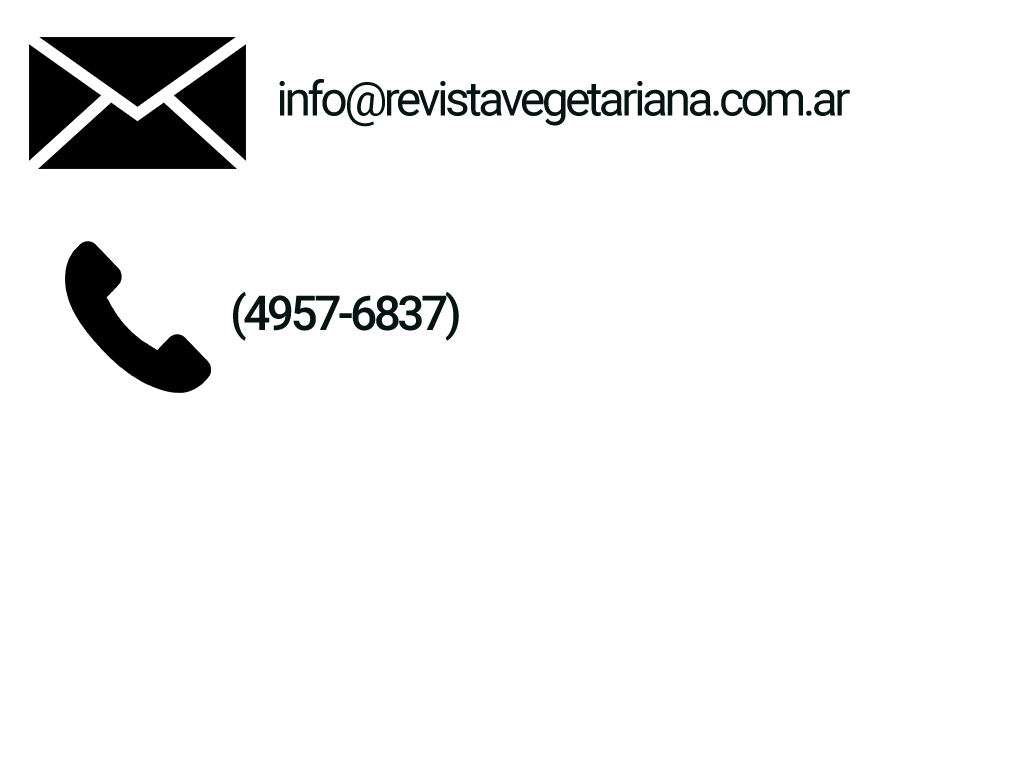
<style>
.page{position:relative;width:1024px;height:768px;background:#ffffff}
.page>*{position:absolute;margin:0}
.t1{font:48px "Roboto-Regular";letter-spacing:-0.075em;color:#051413}
.t2{font:48px "Roboto-Medium";letter-spacing:-0.075em;color:#051413}
</style>
<div class="page">
<p class="t1" style="left:279px;top:79px;width:571px;height:48px">info@revistavegetariana.com.ar</p>
<p class="t2" style="left:233px;top:291px;width:226px;height:50px">(4957-6837)</p>
</div>
